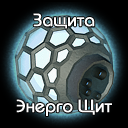
<style>
.page{position:relative;width:128px;height:128px}
.page>*{position:absolute;margin:0}
.t1{font:18px "BauhausC-Medium";color:#ffffff;font-weight:bold}
</style>
<div class="page">
<p class="t1" style="left:33px;top:13px;width:62px;height:16px">Защита</p>
<p class="t1" style="left:16px;top:99px;width:96px;height:17px">Энерго Щит</p>
</div>
